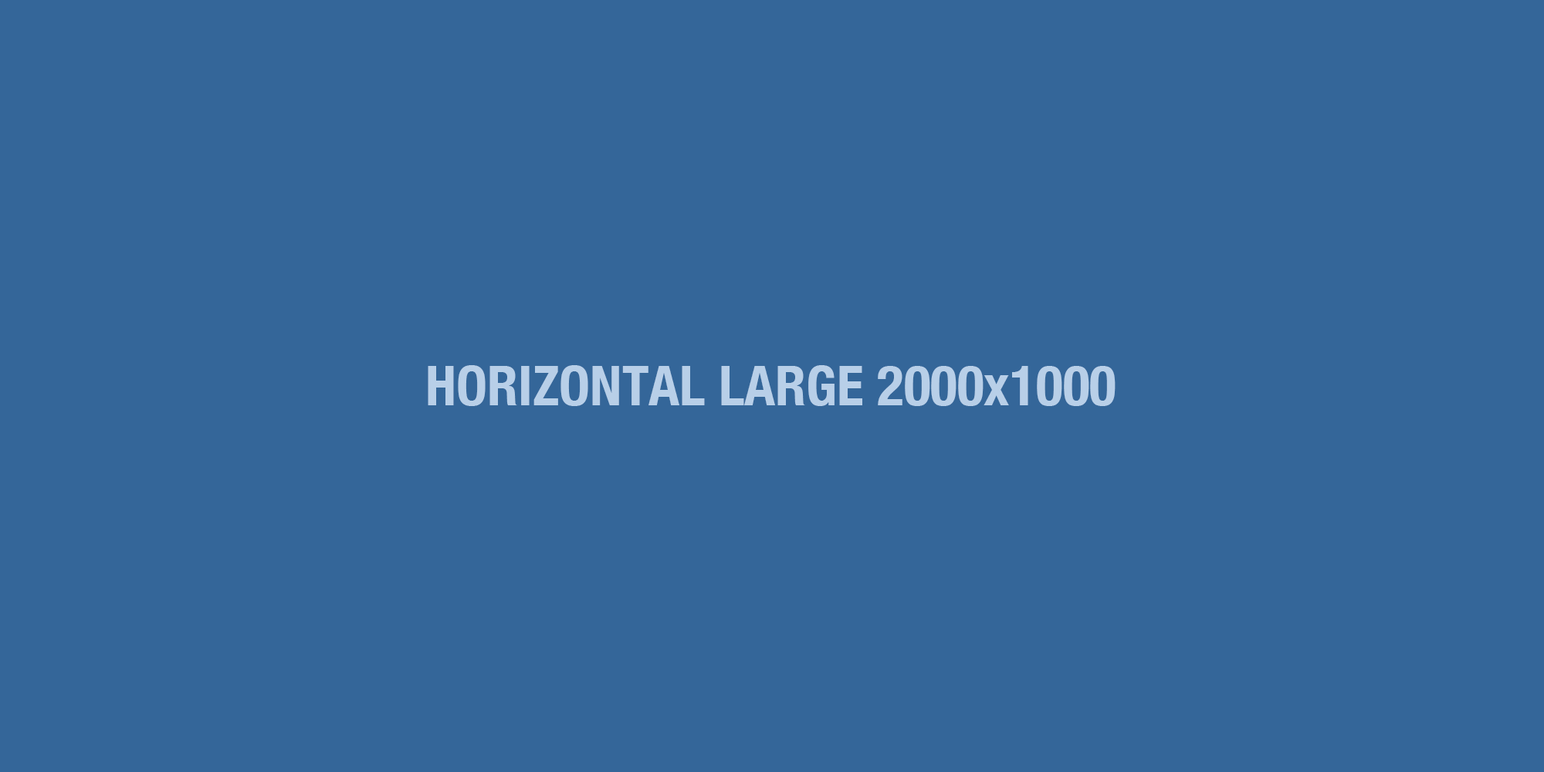
<style>
.page{position:relative;width:1544px;height:772px;background:#346699}
.page>*{position:absolute;margin:0}
.t1{font:55.6px "HelveticaNeue-CondensedBold";color:#b8cfe8}
</style>
<div class="page">
<p class="t1" style="left:428px;top:365px;width:688px;height:41px">HORIZONTAL LARGE 2000x1000</p>
</div>
